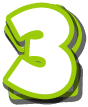
<style>
.page{position:relative;width:88px;height:107px;background:#ffffff}
.page>*{position:absolute;margin:0}
.t1{font:100px "GROBOLD";color:#ffffff}
</style>
<div class="page">
<p class="t1" style="left:7px;top:7px;width:65px;height:88px">3</p>
<p class="t1" style="left:9px;top:9px;width:68px;height:86px">2</p>
</div>
